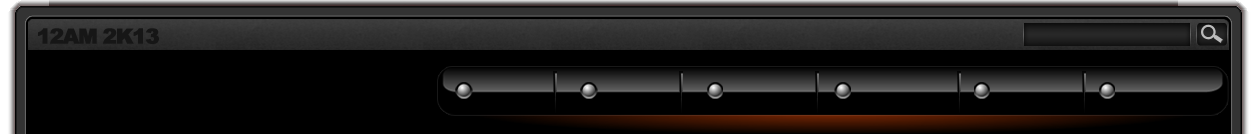
<style>
.page{position:relative;width:1256px;height:134px;background:#000000}
.page>*{position:absolute;margin:0}
.t1{font:21px "Arial-Black";letter-spacing:-0.075em;color:#161616;font-weight:bold}
</style>
<div class="page">
<p class="t1" style="left:38px;top:28px;width:121px;height:16px">12AM 2K13</p>
</div>
